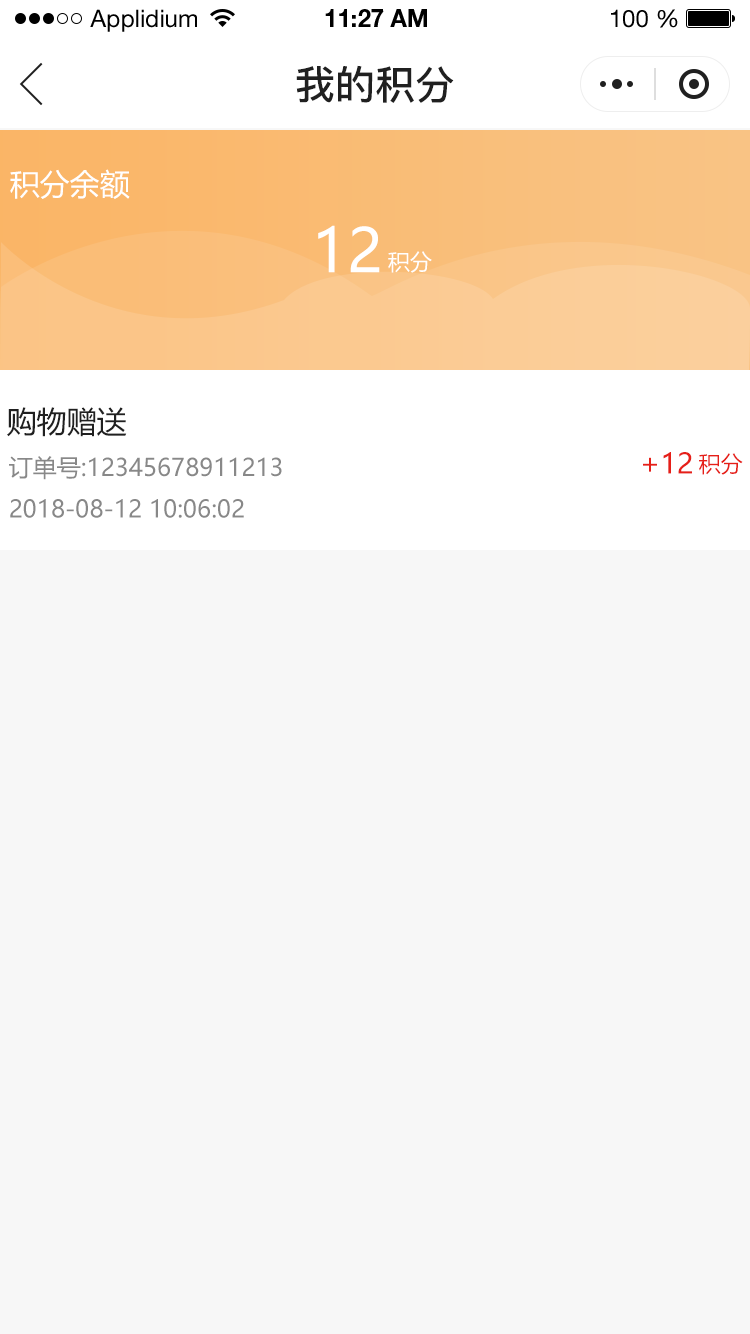
<style>
.page{position:relative;width:750px;height:1334px;background:#f7f7f7}
.page>*{position:absolute;margin:0}
.t1{font:24px "HelveticaNeueLTStd-Roman";color:#000000}
.t2{font:24px "HelveticaNeueLTStd-Bd";color:#000000}
.t3{font:40px "PingFang-SC-Bold";color:#202020;text-transform:uppercase}
.t4{font:30px "MicrosoftYaHei";color:#ffffff;text-transform:uppercase}
.t5{font:60px "MicrosoftYaHei";color:#ffffff;text-transform:uppercase}
.t6{font:22px "MicrosoftYaHei";color:#ffffff;text-transform:uppercase}
.t7{font:30px "MicrosoftYaHei";color:#202020;text-transform:uppercase}
.t8{font:24px "MicrosoftYaHei";color:#888888;text-transform:uppercase}
.t9{font:28px "MicrosoftYaHei";color:#e61f18;text-transform:uppercase}
.t10{font:22px "MicrosoftYaHei";color:#e61f18;text-transform:uppercase}
</style>
<div class="page">
<p class="t1" style="left:90px;top:9px;width:107px;height:23px">Applidium</p>
<p class="t2" style="left:325px;top:9px;width:102px;height:18px">11:27 AM</p>
<p class="t1" style="left:611px;top:9px;width:67px;height:19px">100 %</p>
<p class="t3" style="left:296px;top:65px;width:158px;height:38px">我的积分</p>
<p class="t4" style="left:10px;top:169px;width:120px;height:30px">积分余额</p>
<p class="t5" style="left:318px;top:225px;width:62px;height:48px">12</p>
<p class="t6" style="left:388px;top:251px;width:44px;height:22px">积分</p>
<p class="t7" style="left:7px;top:407px;width:120px;height:30px">购物赠送</p>
<p class="t8" style="left:9px;top:456px;width:273px;height:24px">订单号:12345678911213</p>
<p class="t9" style="left:643px;top:452px;width:49px;height:22px">+12</p>
<p class="t10" style="left:699px;top:453px;width:44px;height:22px">积分</p>
<p class="t8" style="left:10px;top:499px;width:234px;height:19px">2018-08-12 10:06:02</p>
</div>
